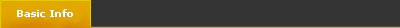
<style>
.page{position:relative;width:400px;height:28px;background:#333333}
.page>*{position:absolute;margin:0}
.t1{font:10px "Verdana-Bold";color:#ffffff}
</style>
<div class="page">
<p class="t1" style="left:17px;top:9px;width:56px;height:8px">Basic Info</p>
</div>
